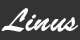
<style>
.page{position:relative;width:80px;height:40px;background:#333333}
.page>*{position:absolute;margin:0}
.t1{font:33px "BrushScriptStd";color:#fefefe}
</style>
<div class="page">
<p class="t1" style="left:1px;top:8px;width:77px;height:24px">Linus</p>
</div>
